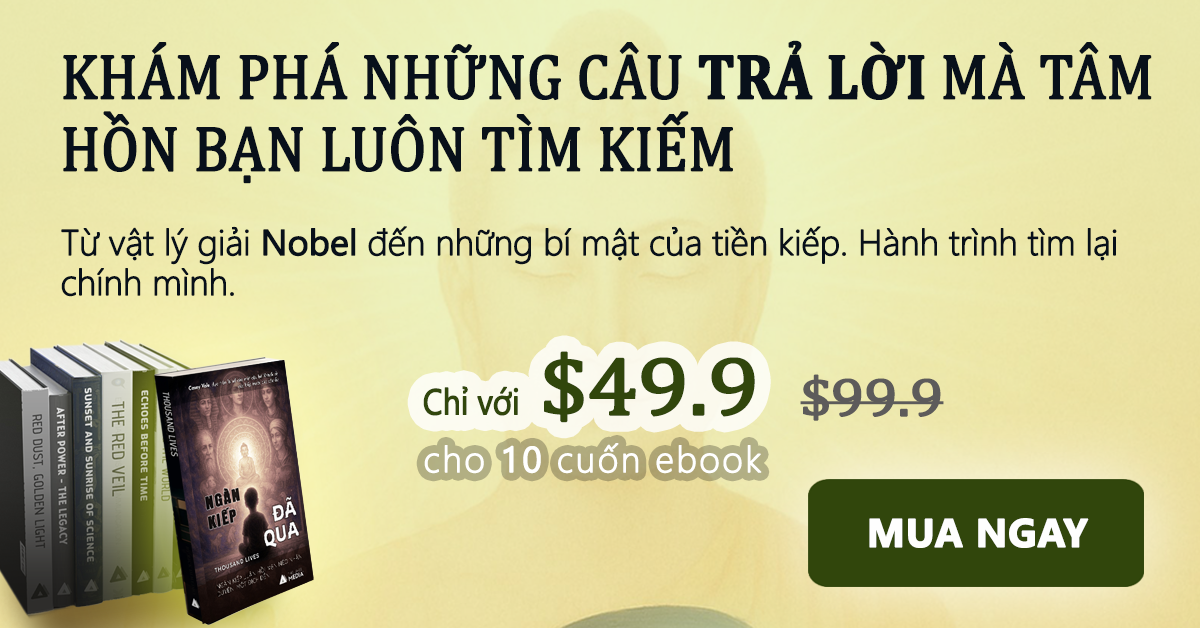
<style>
.page{position:relative;width:1200px;height:628px}
.page>*{position:absolute;margin:0}
.t1{font:64px/72px "Cambria";letter-spacing:-0.01em;color:#08101a;font-weight:bold;scale:0.9 1}
.t2{font:64px/72px "Cambria-Bold";letter-spacing:-0.01em;color:#08101a;font-weight:bold;scale:0.9 1}
.t3{font:36px/40px "SegoeUI-Light";letter-spacing:-0.025em;color:#08101a;font-weight:bold}
.t4{font:36px/40px "SegoeUI";letter-spacing:-0.025em;color:#08101a;font-weight:bold}
.t5{font:36px "SegoeUI";letter-spacing:-0.025em;color:#31460c;font-weight:bold;scale:0.89 1}
.t6{font:82.8px "Cambria";letter-spacing:-0.025em;color:#31460c;font-weight:bold;scale:1.11 1}
.t7{font:54px "Cambria";letter-spacing:-0.025em;color:#5d5b5b;font-weight:bold;scale:1.11 1}
.t8{font:36px "SegoeUI-Light";letter-spacing:0.05em;color:#ffffff;font-weight:bold}
.t9{font:36px "SegoeUI";letter-spacing:0.05em;color:#ffffff;font-weight:bold}
.t10{font:39.6px "SegoeUI-Bold";color:#fefefe;font-weight:bold}
</style>
<div class="page">
<p class="t1" style="left:63px;top:40px;width:1089px;height:144px">KHÁM PHÁ NHỮNG CÂU <span class="t2">TRẢ LỜI</span> MÀ TÂM HỒN BẠN LUÔN TÌM KIẾM</p>
<p class="t3" style="left:61px;top:226px;width:1056px;height:71px">Từ vật lý giải <span class="t4">Nobel </span>đến những bí mật của tiền kiếp. Hành trình tìm lại chính mình.</p>
<p class="t5" style="left:423px;top:351px;width:332px;height:72px">Chỉ với<span class="t6"> $49.9</span></p>
<p class="t7" style="left:800px;top:374px;width:144px;height:47px">$99.9</p>
<p class="t8" style="left:424px;top:443px;width:338px;height:31px">cho <span class="t9">10</span> cuốn ebook</p>
<p class="t10" style="left:869px;top:518px;width:220px;height:30px">MUA NGAY</p>
</div>
